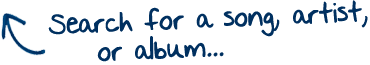
<style>
.page{position:relative;width:370px;height:65px;background:#ffffff}
.page>*{position:absolute;margin:0}
.t1{font:24px "NothingYouCouldSay";letter-spacing:-0.025em;color:#003060;font-weight:bold}
</style>
<div class="page">
<p class="t1" style="left:48px;top:0px;width:320px;height:62px;rotate:-2deg">Search for a song, artist,<br>    or album...</p>
</div>
